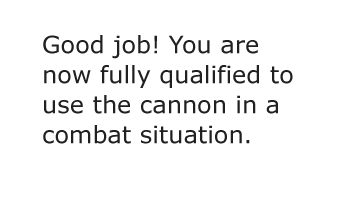
<style>
.page{position:relative;width:340px;height:222px;background:#ffffff}
.page>*{position:absolute;margin:0}
.t1{font:24px/30px "Verdana";color:#202020}
</style>
<div class="page">
<p class="t1" style="left:43px;top:35px;width:250px;height:109px">Good job! You are now fully qualified to use the cannon in a combat situation.</p>
</div>
